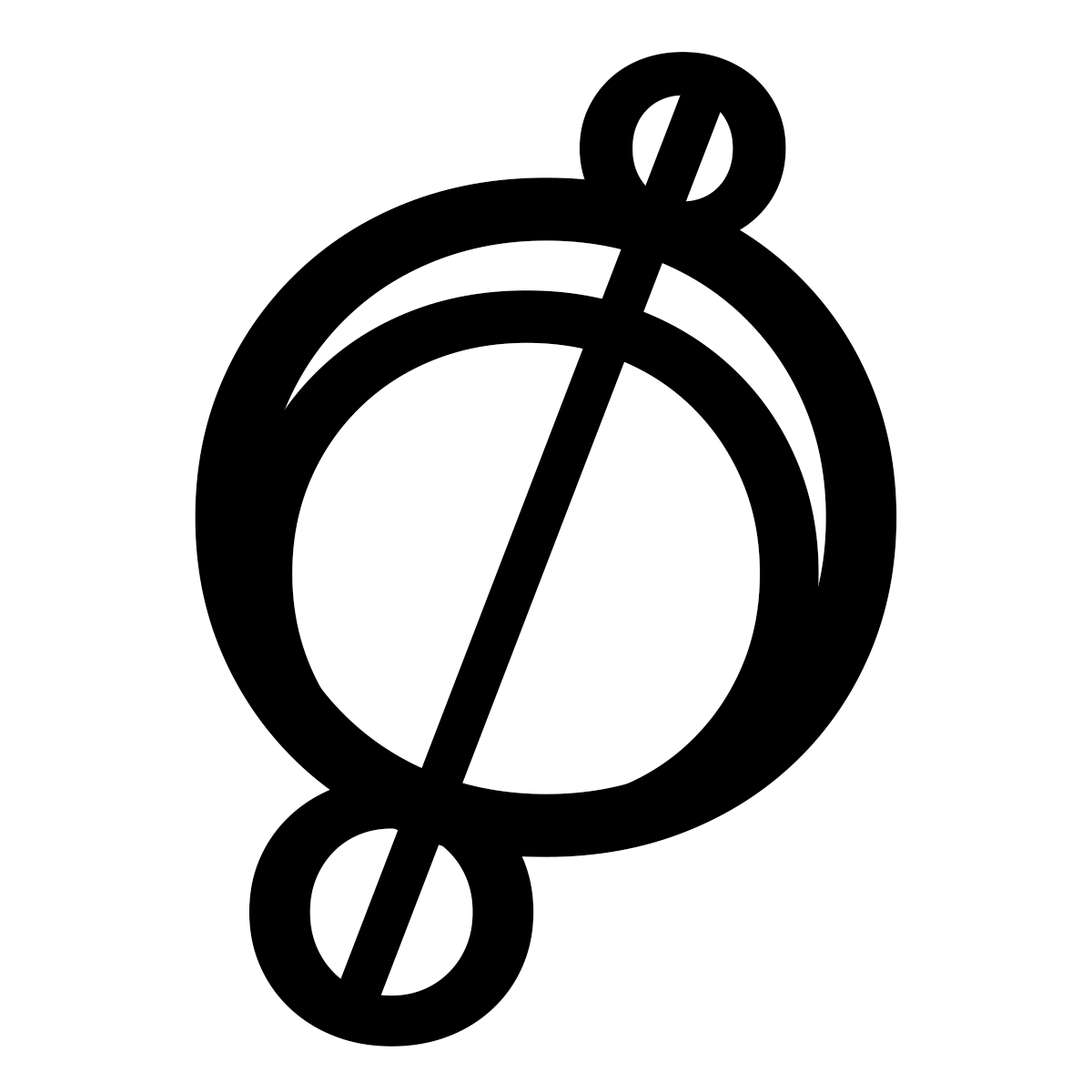
<style>
.page{position:relative;width:1092px;height:1092px;background:#ffffff}
.page>*{position:absolute;margin:0}
.t1{font:265px "MontserratRoman-ExtraBold";color:#000000}
.t2{font:954.1px "MontserratRoman-Regular";color:#000000}
.t3{font:795.1px "MontserratRoman-Regular";color:#000000}
.t4{font:371px "MontserratRoman-Bold";color:#000000}
</style>
<div class="page">
<p class="t1" style="left:579px;top:52px;width:207px;height:194px">O</p>
<p class="t2" style="left:195px;top:177px;width:702px;height:680px">O</p>
<p class="t3" style="left:234px;top:290px;width:585px;height:567px">O</p>
<p class="t4" style="left:248px;top:777px;width:286px;height:269px">O</p>
</div>
